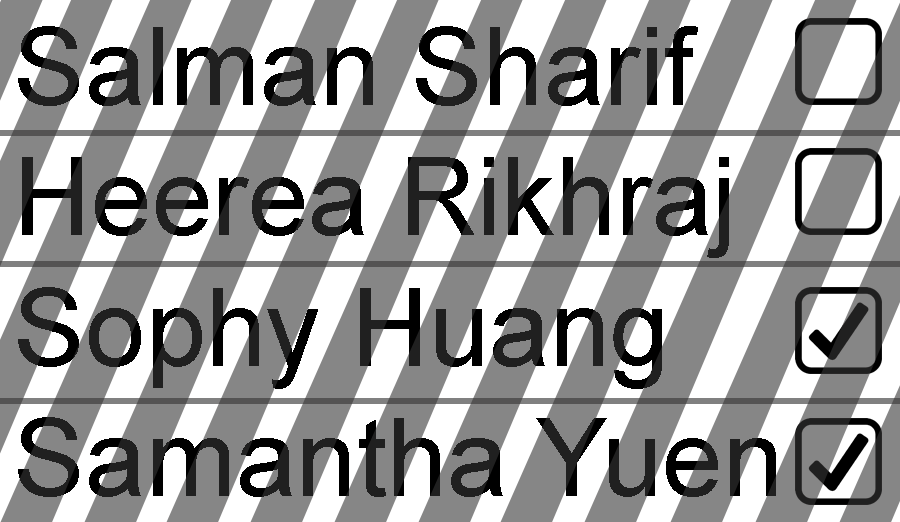
<style>
.page{position:relative;width:900px;height:522px;background:#868686}
.page>*{position:absolute;margin:0}
.t1{font:108.5px "ArialMT"}
</style>
<div class="page">
<p class="t1" style="left:18px;top:26px;width:758px;height:471px">Salman Sharif<br>Heerea Rikhraj<br>Sophy Huang<br>Samantha Yuen</p>
</div>
